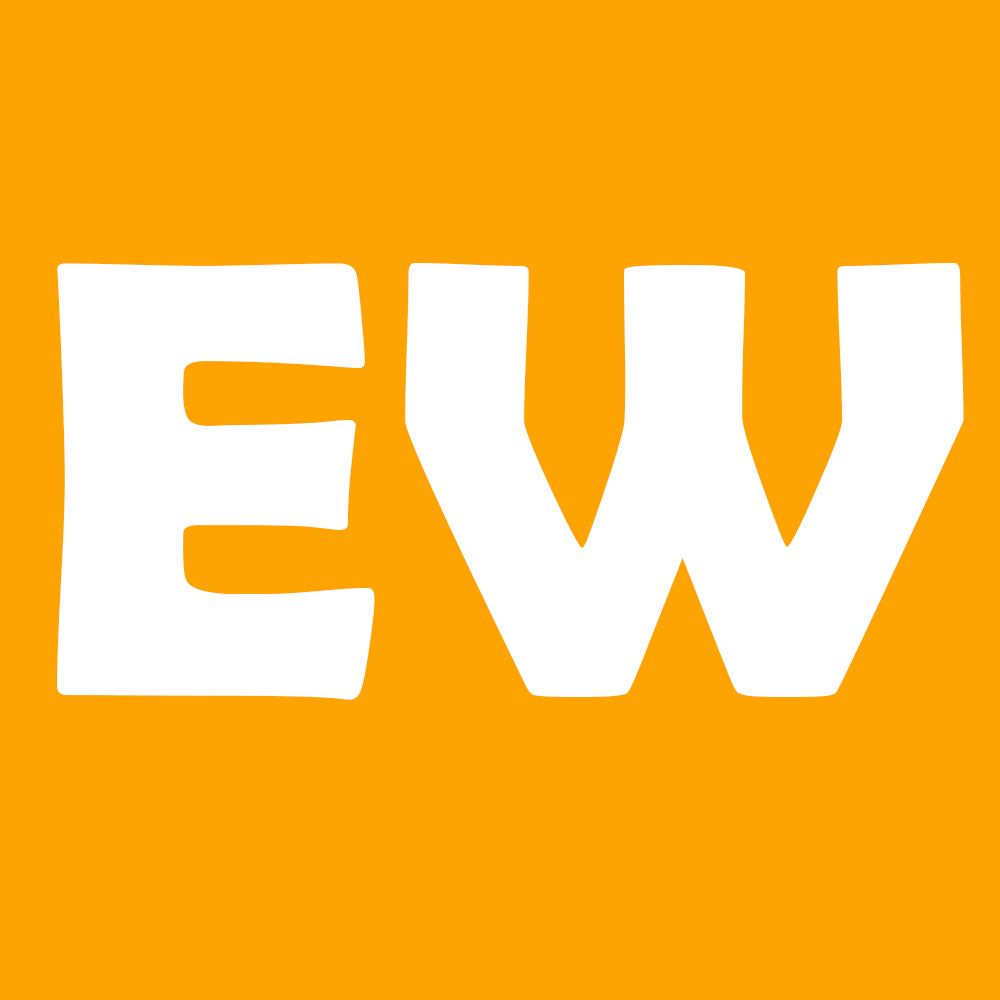
<style>
.page{position:relative;width:1000px;height:1000px;background:#fda403}
.page>*{position:absolute;margin:0}
.t1{font:630.3px "BerlinSansFBDemi-Bold";color:#ffffff}
</style>
<div class="page">
<p class="t1" style="left:57px;top:263px;width:907px;height:437px">EW</p>
</div>
